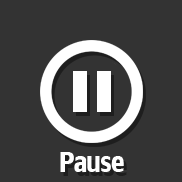
<style>
.page{position:relative;width:182px;height:182px;background:#333333}
.page>*{position:absolute;margin:0}
.t1{font:28.2px "CommunistSansBold";letter-spacing:-0.08em;color:#f4f4f4;scale:0.89 1}
</style>
<div class="page">
<p class="t1" style="left:60px;top:152px;width:64px;height:20px">Pause</p>
</div>
